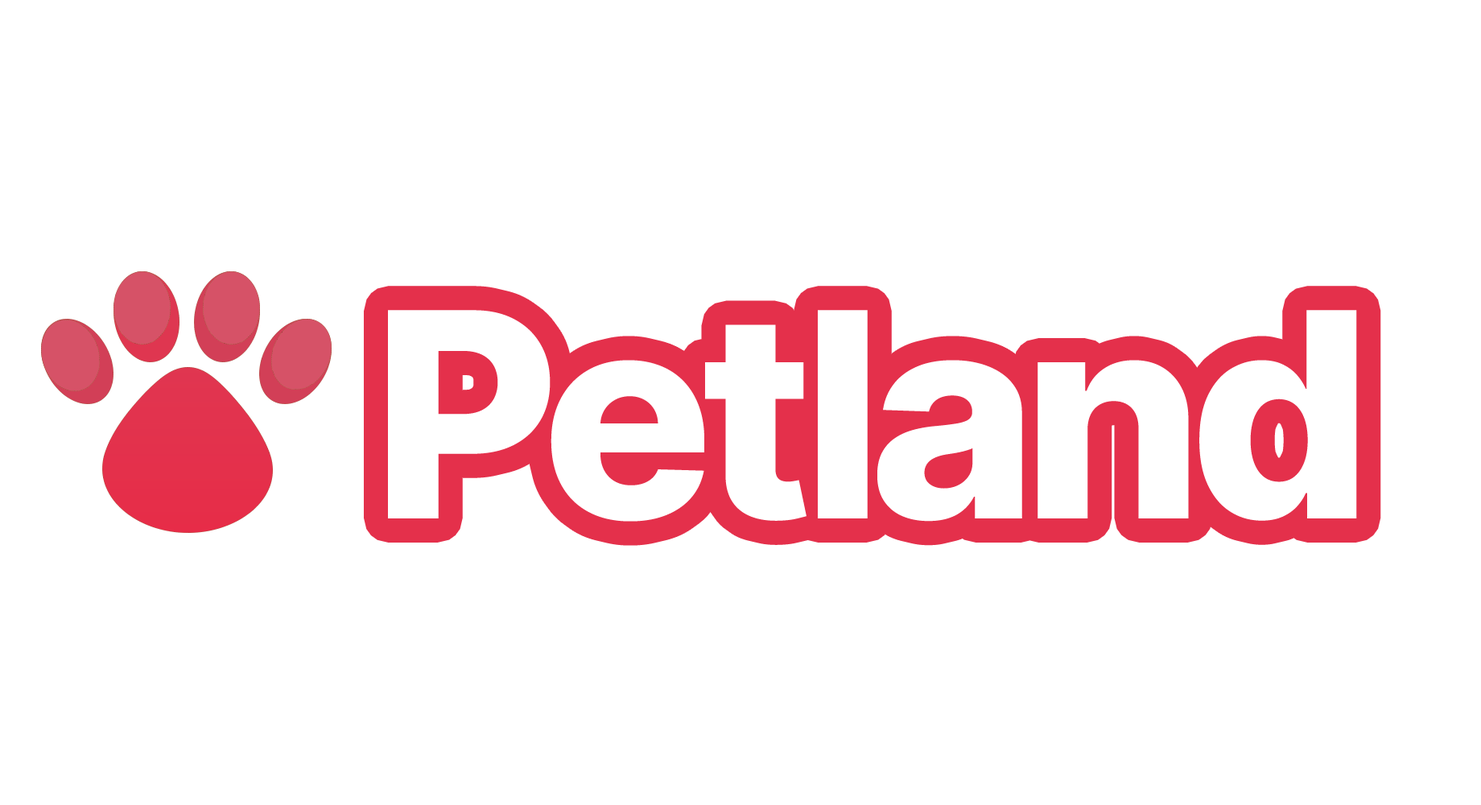
<style>
.page{position:relative;width:1481px;height:805px;background:#ffffff}
.page>*{position:absolute;margin:0}
.t1{font:286px "Inter-ExtraBold";letter-spacing:-0.05em;color:#ffffff}
</style>
<div class="page">
<p class="t1" style="left:388px;top:310px;width:969px;height:212px">Petland</p>
</div>
